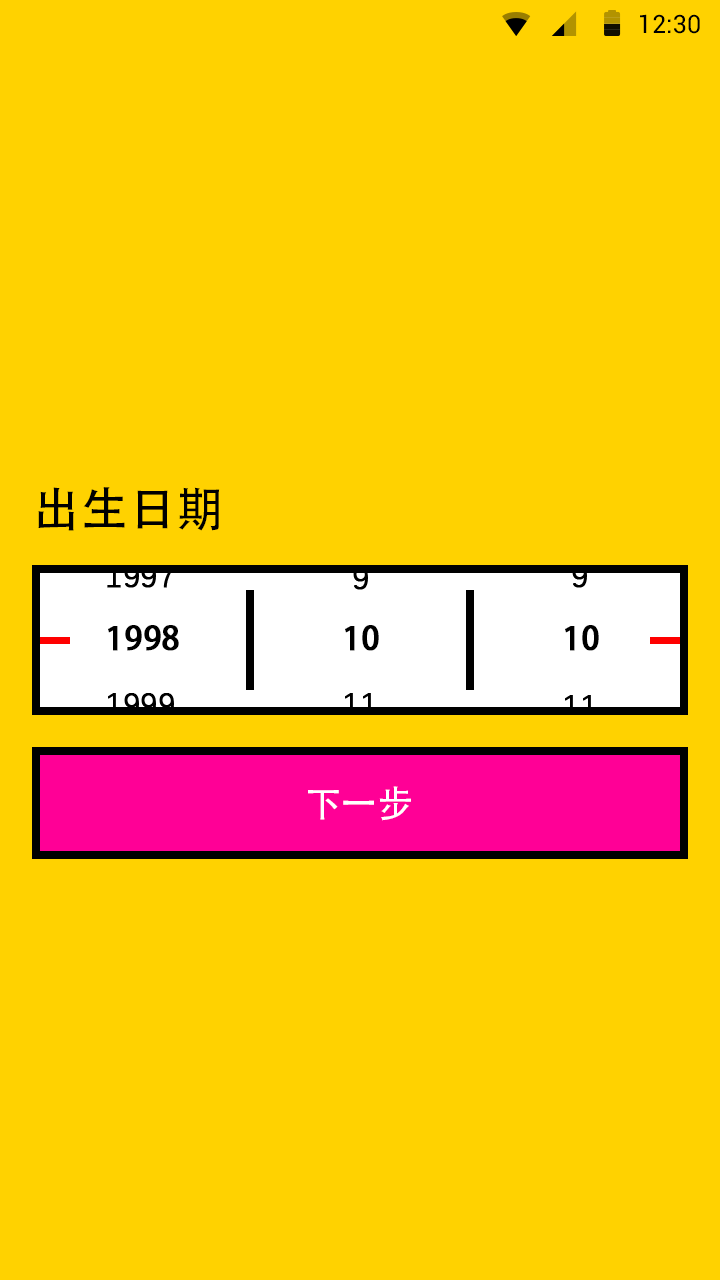
<style>
.page{position:relative;width:720px;height:1280px;background:#ffd200}
.page>*{position:absolute;margin:0}
.t1{font:25.4px "Roboto-Regular";color:#000000}
.t2{font:48px "AdobeHeitiStd-Regular";letter-spacing:-0.004em;color:#000000}
.t3{font:32px "AdobeHeitiStd-Regular";color:#000000;font-weight:bold}
.t4{font:36px "AdobeHeitiStd-Regular";letter-spacing:-0.004em;color:#ffffff}
</style>
<div class="page">
<p class="t1" style="left:640px;top:14px;width:60px;height:20px">12:30</p>
<p class="t2" style="left:38px;top:487px;width:182px;height:44px">出生日期</p>
<p class="t3" style="left:108px;top:625px;width:71px;height:26px">1998</p>
<p class="t3" style="left:345px;top:625px;width:34px;height:26px">10</p>
<p class="t3" style="left:565px;top:625px;width:34px;height:26px">10</p>
<p class="t4" style="left:308px;top:786px;width:103px;height:35px">下一步</p>
</div>
